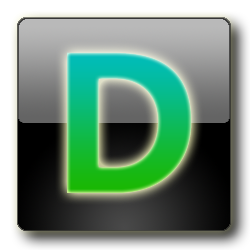
<style>
.page{position:relative;width:250px;height:250px}
.page>*{position:absolute;margin:0}
.t1{font:200px "SegoeUI-Bold"}
</style>
<div class="page">
<p class="t1" style="left:67px;top:52px;width:125px;height:141px">D</p>
</div>
